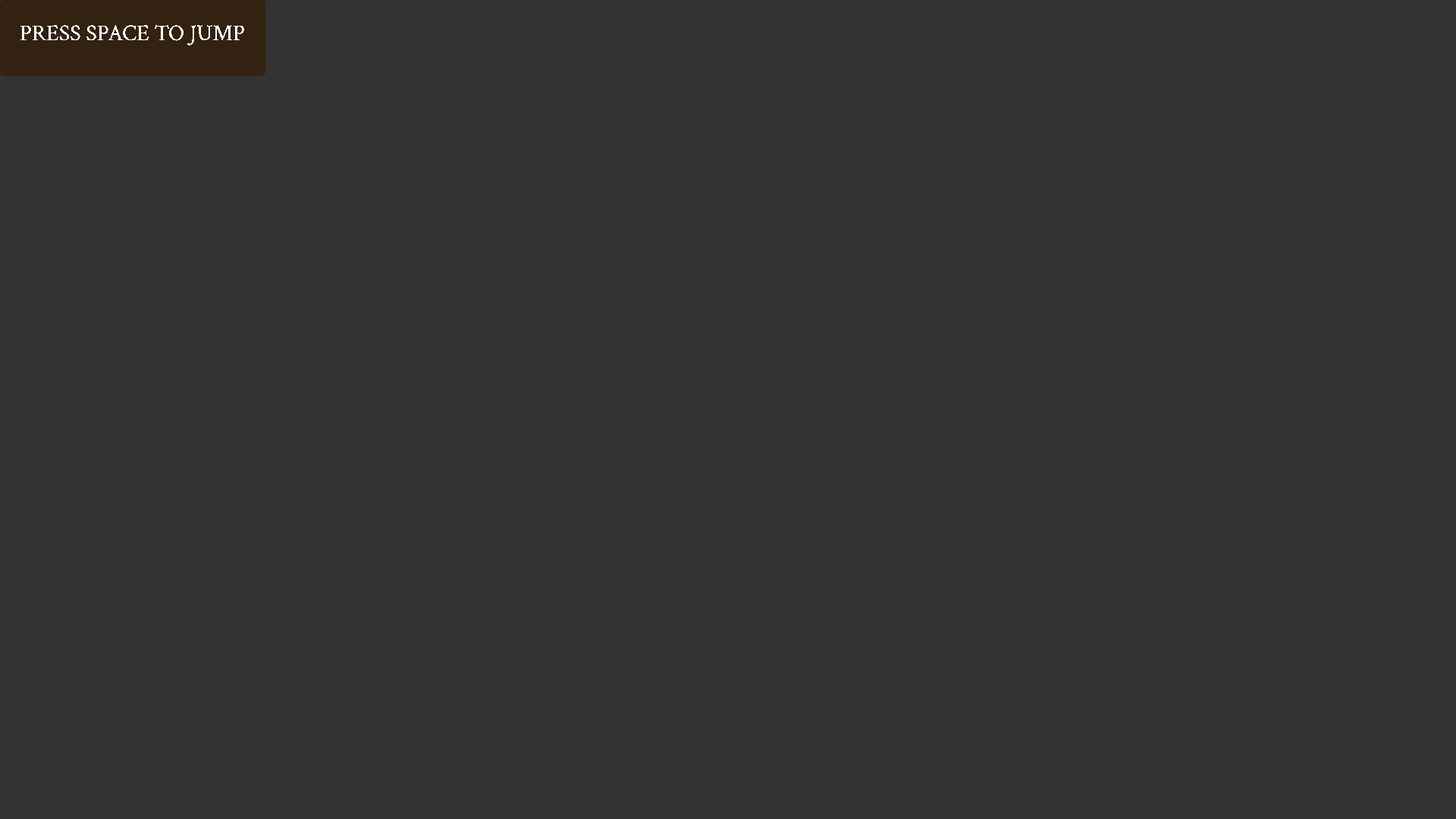
<style>
.page{position:relative;width:1456px;height:819px;background:#333333}
.page>*{position:absolute;margin:0}
.t1{font:22.7px "CrimsonText-Regular";color:#ffffff}
</style>
<div class="page">
<p class="t1" style="left:20px;top:25px;width:224px;height:20px">PRESS SPACE TO JUMP</p>
</div>
